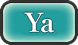
<style>
.page{position:relative;width:78px;height:45px}
.page>*{position:absolute;margin:0}
.t1{font:26px "RyuminPro-ExBold";letter-spacing:-0.08em;color:#ffffff}
</style>
<div class="page">
<p class="t1" style="left:24px;top:12px;width:31px;height:21px">Ya</p>
</div>
